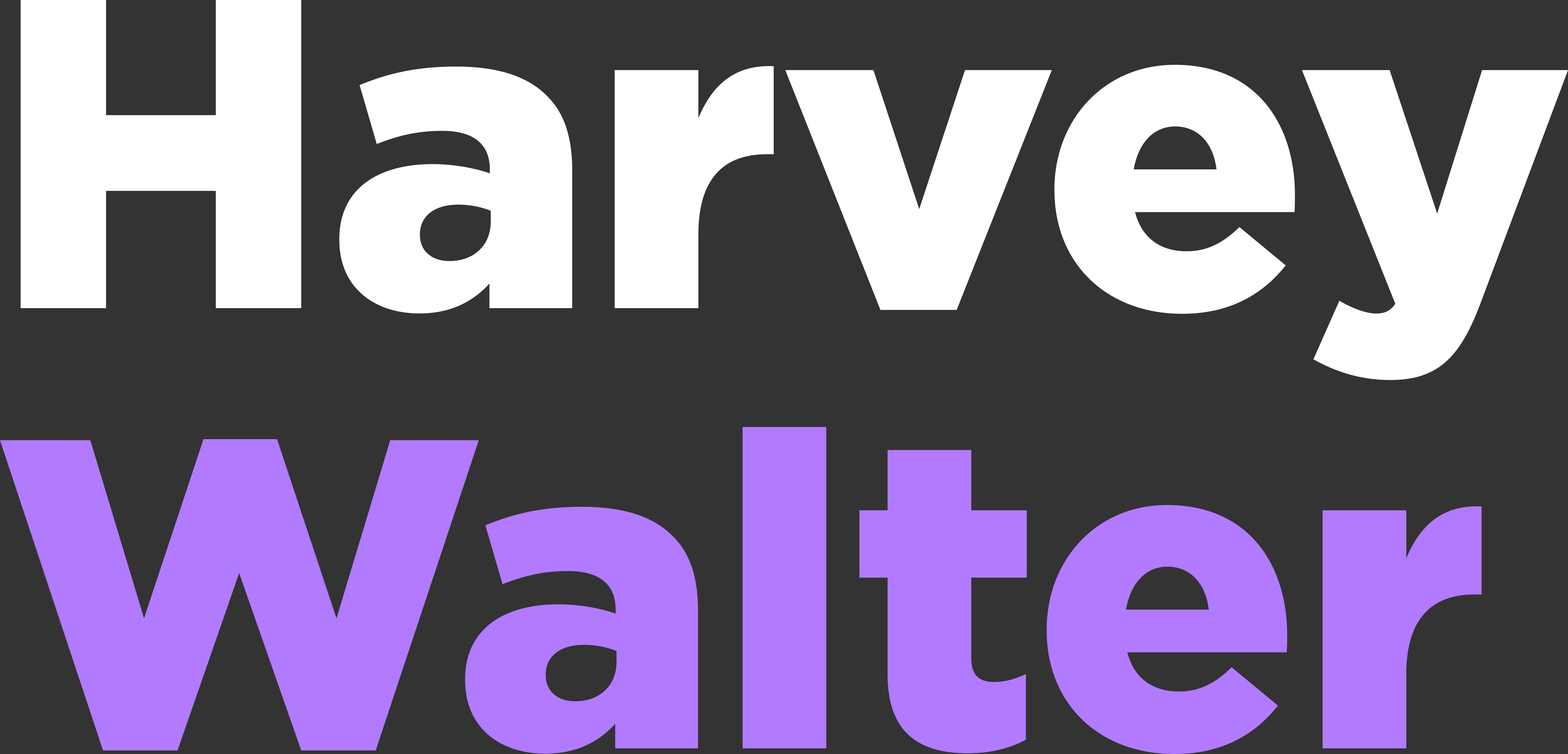
<style>
.page{position:relative;width:1568px;height:754px;background:#333333}
.page>*{position:absolute;margin:0}
.t1{font:440.4px/440.4px "Gotham-Black";color:#ffffff}
.t2{font:440.4px/440.4px "Gotham-Black";color:#b27aff}
</style>
<div class="page">
<p class="t1" style="left:0px;top:0px;width:1568px;height:754px">Harvey<br><span class="t2">Walter</span></p>
</div>
